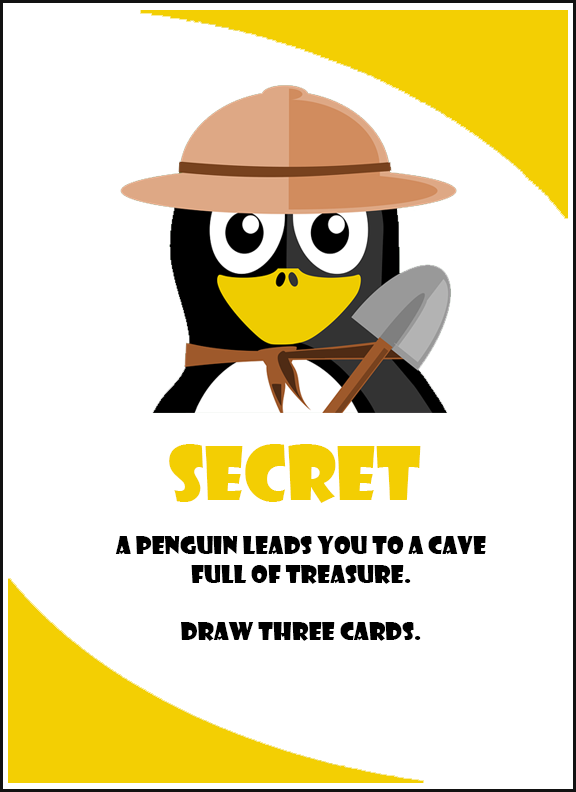
<style>
.page{position:relative;width:576px;height:792px;background:#ffffff}
.page>*{position:absolute;margin:0}
.t1{font:72px "ShowcardGothic-Reg";color:#f3ce03}
.t2{font:24px "ShowcardGothic-Reg";color:#000000}
</style>
<div class="page">
<p class="t1" style="left:169px;top:444px;width:252px;height:59px">SECRET</p>
<p class="t2" style="left:115px;top:536px;width:371px;height:105px;text-align:center">A penguin leads you to a cave<br>full of treasure. <br><br>Draw three cards.</p>
</div>
